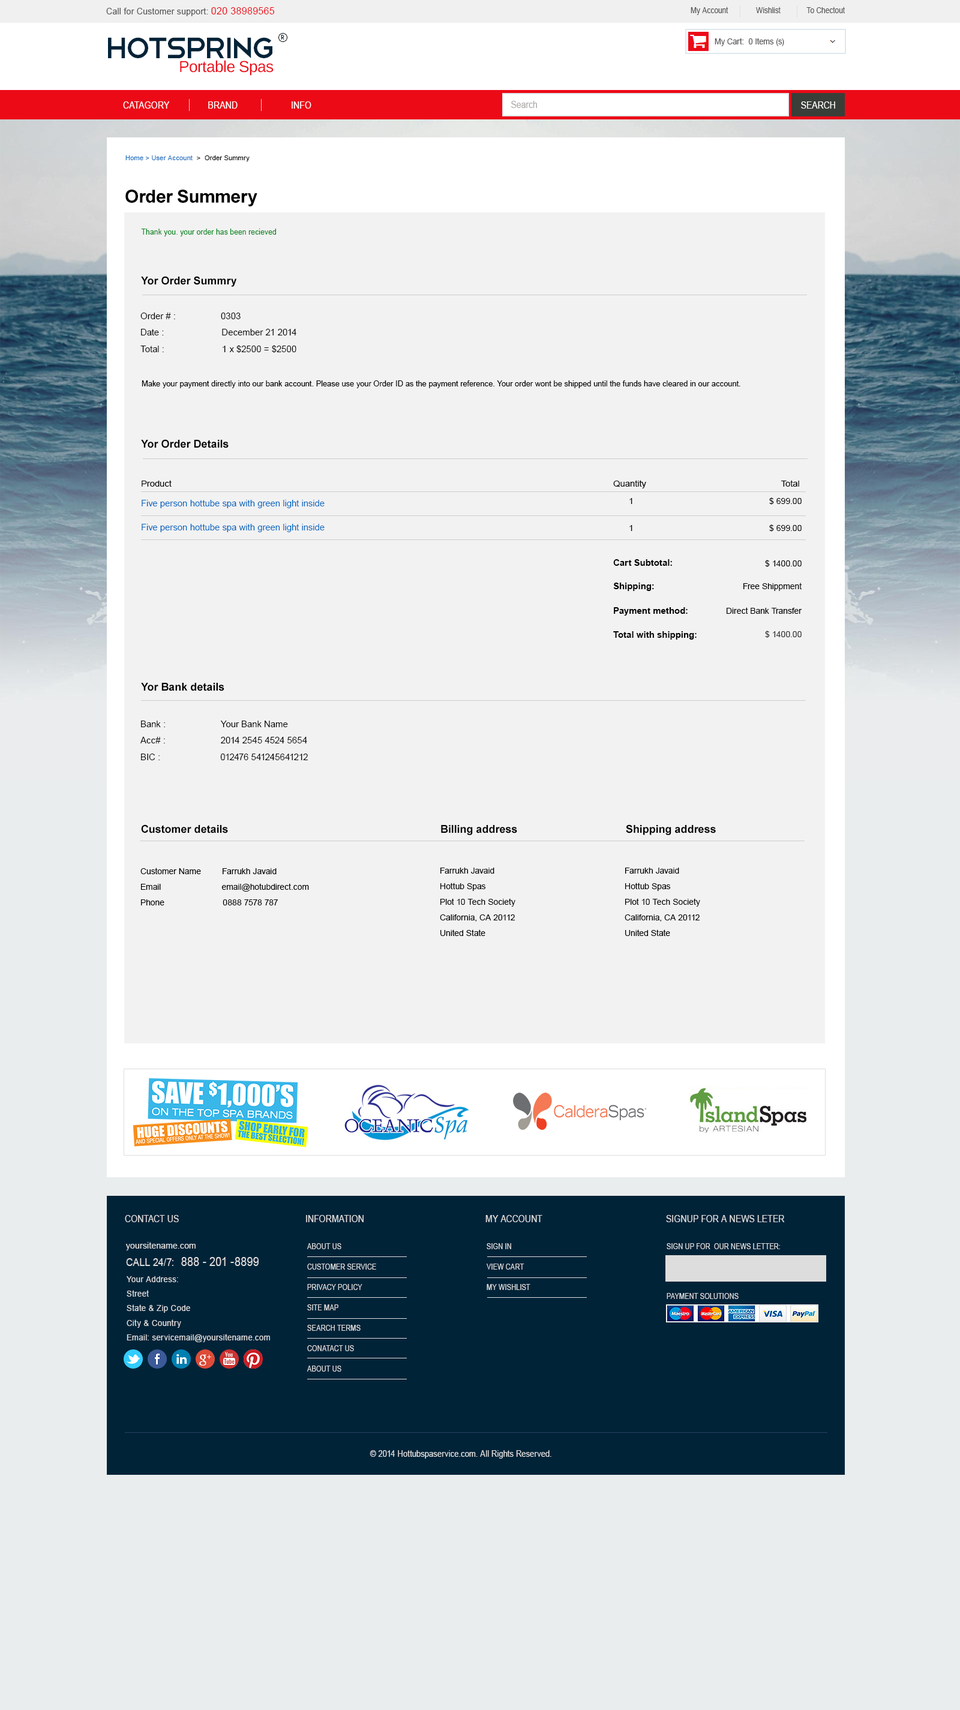
<style>
.page{position:relative;width:960px;height:1710px;background:#f2f2f2}
.page>*{position:absolute;margin:0}
.t1{font:8.8px "ArialMT";letter-spacing:0.02em;color:#555555;scale:0.95 1}
.t2{font:10.1px "ArialMT";letter-spacing:0.02em;color:#ec0a17;scale:0.95 1}
.t3{font:8.3px "ArialMT";color:#555555;scale:0.87 1}
.t4{font:38.5px "Telegrafico";letter-spacing:-0.08em;color:#012338}
.t5{font:6.3px "HarmoniaSansStd-Regular";letter-spacing:0.03em;color:#012338}
.t6{font:8.2px "ArialMT";color:#555555;scale:0.95 1}
.t7{font:15.8px "LiberationSans";letter-spacing:-0.02em;color:#ec0a17}
.t8{font:9.7px "ArialMT";letter-spacing:0.01em;color:#ffffff;scale:0.87 1}
.t9{font:9.7px "ArialMT";color:#aeaba9;scale:0.87 1}
.t10{font:9.7px "ArialMT";color:#ffffff;scale:0.87 1}
.t11{font:6.6px "ArialMT";letter-spacing:0.02em;color:#1d70c0}
.t12{font:6.6px "ArialMT";letter-spacing:0.02em;color:#000000}
.t13{font:18px "Arial-BoldMT";letter-spacing:-0.02em;color:#000000}
.t14{font:7.8px "ArialMT";letter-spacing:0.01em;color:#07881f;scale:0.93 1}
.t15{font:10.8px "Arial-BoldMT";color:#000000}
.t16{font:9px "ArialMT";color:#000000}
.t17{font:7.8px "ArialMT";color:#000000}
.t18{font:8.4px "ArialMT";color:#000000;scale:1.05 1}
.t19{font:8.4px "ArialMT";color:#000000}
.t20{font:9px "ArialMT";color:#0066c0}
.t21{font:9px "Arial-BoldMT";color:#000000}
.t22{font:8.4px "ArialMT";color:#2c2d2d}
.t23{font:9.7px "ArialMT";letter-spacing:0.01em;color:#dddddd;scale:0.87 1}
.t24{font:9.1px "ArialMT";letter-spacing:0.03em;color:#dddddd;scale:0.9 1}
.t25{font:7.6px/20.4px "ArialMT";letter-spacing:0.01em;color:#dddddd;scale:0.87 1}
.t26{font:7.6px "ArialMT";letter-spacing:0.01em;color:#dddddd;scale:0.87 1}
.t27{font:12.4px "ArialMT";letter-spacing:0.01em;color:#dddddd;scale:0.87 1}
.t28{font:11px "ArialMT";letter-spacing:0.01em;color:#dddddd;scale:0.87 1}
.t29{font:8.5px/14.4px "ArialMT";letter-spacing:0.03em;color:#dddddd;scale:0.94 1}
.t30{font:9px "ArialMT";letter-spacing:0.01em;color:#dddddd;scale:0.87 1}
</style>
<div class="page">
<p class="t1" style="left:106px;top:7px;width:169px;height:9px">Call for Customer support: <span class="t2">020 38989565</span></p>
<p class="t3" style="left:691px;top:7px;width:154px;height:8px">My Account              Wishlist             To Chectout</p>
<p class="t4" style="left:108px;top:37px;width:164px;height:21px">HotSpring</p>
<p class="t5" style="left:281px;top:35px;width:3px;height:5px">R</p>
<p class="t6" style="left:715px;top:38px;width:69px;height:8px">My Cart:  0 Items (s)</p>
<p class="t7" style="left:180px;top:60px;width:94px;height:16px">Portable Spas</p>
<p class="t8" style="left:123px;top:101px;width:188px;height:8px">CATAGORY                BRAND                      INFO</p>
<p class="t9" style="left:511px;top:101px;width:26px;height:7px">Search</p>
<p class="t10" style="left:801px;top:101px;width:34px;height:8px">SEARCH</p>
<p class="t11" style="left:125px;top:155px;width:125px;height:6px">Home &gt; User Account <span class="t12"> &gt;  Order Summry</span></p>
<p class="t13" style="left:125px;top:190px;width:132px;height:16px">Order Summery</p>
<p class="t14" style="left:141px;top:229px;width:135px;height:7px">Thank you. your order has been recieved</p>
<p class="t15" style="left:141px;top:276px;width:96px;height:11px">Yor Order Summry</p>
<p class="t16" style="left:140px;top:313px;width:156px;height:40px">Order # :                  0303<br>Date :                       December 21 2014<br>Total :                       1 x $2500 = $2500</p>
<p class="t17" style="left:142px;top:380px;width:598px;height:8px">Make your payment directly into our bank account. Please use your Order ID as the payment reference. Your order wont be shipped until the funds have cleared in our account.</p>
<p class="t15" style="left:141px;top:439px;width:88px;height:9px">Yor Order Details</p>
<p class="t18" style="left:142px;top:480px;width:657px;height:8px">Product                                                                                                                                                                                    Quantity                                                       Total</p>
<p class="t19" style="left:769px;top:497px;width:33px;height:8px">$ 699.00</p>
<p class="t20" style="left:142px;top:500px;width:183px;height:8px">Five person hottube spa with green light inside</p>
<p class="t19" style="left:629px;top:498px;width:3px;height:6px">1</p>
<p class="t20" style="left:142px;top:524px;width:183px;height:8px">Five person hottube spa with green light inside</p>
<p class="t19" style="left:629px;top:525px;width:3px;height:6px">1</p>
<p class="t19" style="left:769px;top:524px;width:33px;height:8px">$ 699.00</p>
<p class="t21" style="left:613px;top:559px;width:59px;height:7px">Cart Subtotal:</p>
<p class="t19" style="left:765px;top:560px;width:37px;height:7px">$ 1400.00</p>
<p class="t21" style="left:613px;top:583px;width:41px;height:8px">Shipping:</p>
<p class="t19" style="left:743px;top:583px;width:59px;height:8px">Free Shippment</p>
<p class="t21" style="left:614px;top:607px;width:74px;height:9px">Payment method:</p>
<p class="t19" style="left:727px;top:607px;width:75px;height:7px">Direct Bank Transfer</p>
<p class="t21" style="left:613px;top:631px;width:84px;height:9px">Total with shipping:</p>
<p class="t22" style="left:765px;top:631px;width:37px;height:7px">$ 1400.00</p>
<p class="t15" style="left:141px;top:683px;width:83px;height:8px">Yor Bank details</p>
<p class="t16" style="left:140px;top:721px;width:168px;height:39px">Bank :                      Your Bank Name <br>Acc# :                      2014 2545 4524 5654<br>BIC :                        012476 541245641212</p>
<p class="t15" style="left:141px;top:824px;width:87px;height:9px">Customer details</p>
<p class="t15" style="left:441px;top:825px;width:76px;height:10px">Billing address</p>
<p class="t15" style="left:626px;top:824px;width:90px;height:11px">Shipping address</p>
<p class="t19" style="left:140px;top:868px;width:169px;height:37px">Customer Name         Farrukh Javaid<br>Email                          email@hotubdirect.com <br>Phone                         0888 7578 787</p>
<p class="t19" style="left:440px;top:868px;width:75px;height:68px">Farrukh Javaid<br>Hottub Spas <br>Plot 10 Tech Society <br>California, CA 20112<br>United State</p>
<p class="t19" style="left:625px;top:868px;width:75px;height:68px">Farrukh Javaid<br>Hottub Spas <br>Plot 10 Tech Society <br>California, CA 20112<br>United State</p>
<p class="t23" style="left:125px;top:1215px;width:54px;height:7px">CONTACT US</p>
<p class="t23" style="left:306px;top:1215px;width:58px;height:7px">INFORMATION</p>
<p class="t23" style="left:485px;top:1215px;width:57px;height:7px">MY ACCOUNT</p>
<p class="t23" style="left:666px;top:1215px;width:119px;height:7px">SIGNUP FOR A NEWS LETER</p>
<p class="t24" style="left:125px;top:1242px;width:71px;height:8px">yoursitename.com</p>
<p class="t25" style="left:307px;top:1243px;width:69px;height:129px;text-align:justify">ABOUT US<br>CUSTOMER SERVICE<br>PRIVACY POLICY <br>SITE MAP<br>SEARCH TERMS<br>CONATACT US<br>ABOUT US</p>
<p class="t25" style="left:487px;top:1243px;width:43px;height:47px;text-align:justify">SIGN IN<br>VIEW CART<br>MY WISHLIST</p>
<p class="t26" style="left:667px;top:1243px;width:113px;height:6px">SIGN UP FOR  OUR NEWS LETTER:</p>
<p class="t27" style="left:126px;top:1257px;width:133px;height:9px"><span class="t28">CALL 24/7:  </span>888 - 201 -8899</p>
<p class="t29" style="left:127px;top:1276px;width:143px;height:66px;text-align:justify">Your Address:<br>Street<br>State &amp; Zip Code<br>City &amp; Country <br>Email: servicemail@yoursitename.com</p>
<p class="t26" style="left:667px;top:1293px;width:72px;height:6px">PAYMENT SOLUTIONS</p>
<p class="t30" style="left:370px;top:1450px;width:181px;height:9px">© 2014 Hottubspaservice.com. All Rights Reserved.</p>
</div>
